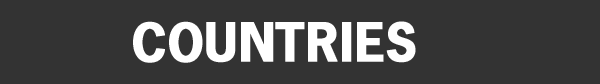
<style>
.page{position:relative;width:600px;height:84px;background:#333333}
.page>*{position:absolute;margin:0}
.t1{font:50px "PFNewsGothic-Bold";color:#ffffff;font-weight:bold}
</style>
<div class="page">
<p class="t1" style="left:133px;top:21px;width:283px;height:42px">COUNTRIES</p>
</div>
